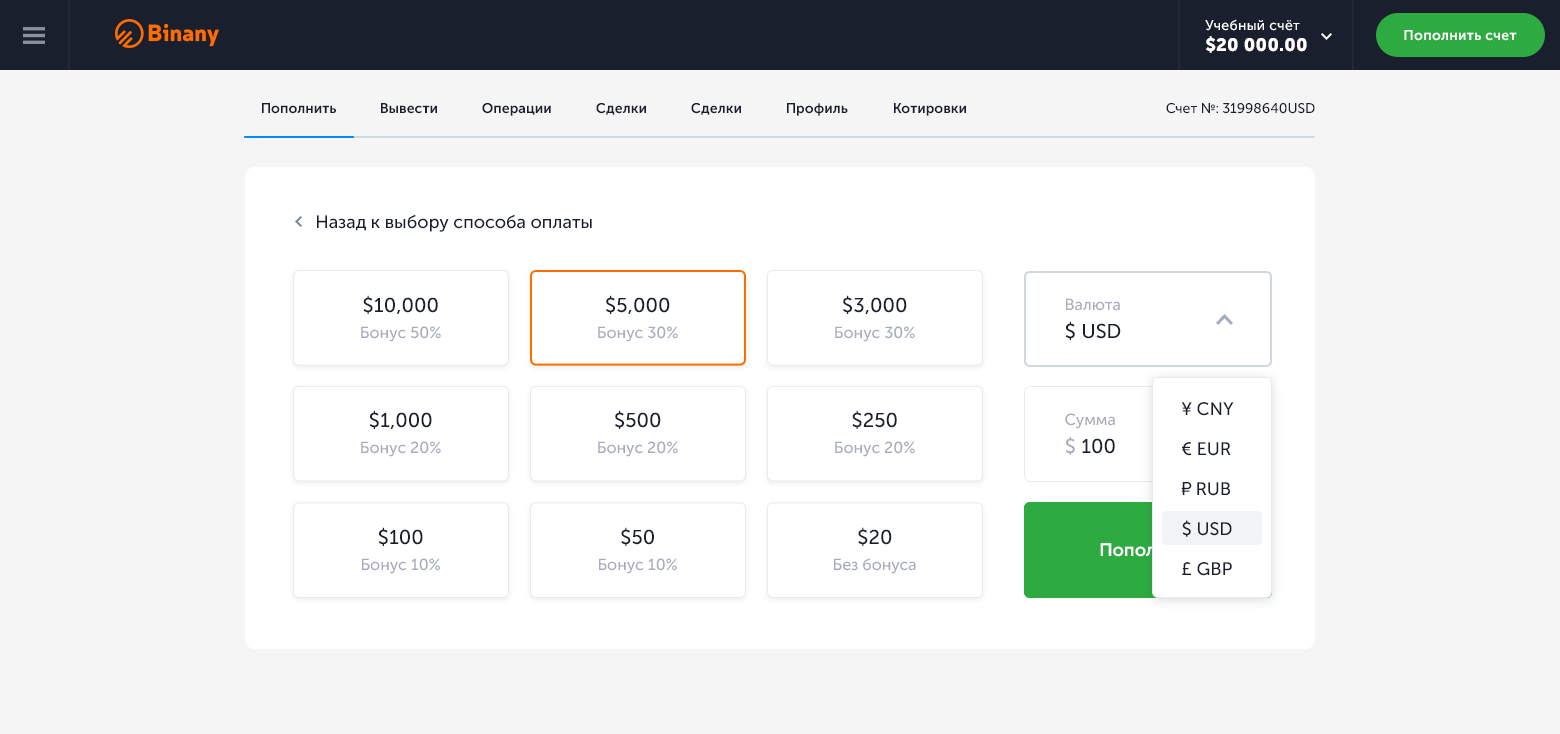
<style>
.page{position:relative;width:1560px;height:734px;background:#f5f5f5}
.page>*{position:absolute;margin:0}
.t1{font:14px "MuseoSansCyrl-500";letter-spacing:0.02em;color:#ffffff}
.t2{font:18px "MuseoSansCyrl-900";letter-spacing:0.02em;color:#ffffff}
.t3{font:14px "MuseoSansCyrl-700";letter-spacing:0.02em;color:#ffffff}
.t4{font:14px "MuseoSansCyrl-700";color:#191f2d}
.t5{font:14px "MuseoSansCyrl-500";color:#191f2d}
.t6{font:18px "MuseoSansCyrl-500";color:#191f2d}
.t7{font:16px/26px "MuseoSansCyrl-500";color:#a5acbd}
.t8{font:20px "MuseoSansCyrl-500";color:#191f2d}
.t9{font:16px/28px "MuseoSansCyrl-500";color:#a5acbd}
.t10{font:20px/28px "MuseoSansCyrl-500";color:#191f2d}
.t11{font:20px/28px "MuseoSansCyrl-500";color:#a5acbd}
.t12{font:18px/40px "MuseoSansCyrl-500";color:#191f2d}
.t13{font:18px/40px "ArialMT";color:#191f2d}
.t14{font:20px/24px "MuseoSansCyrl-500";color:#191f2d}
.t15{font:18px "MuseoSansCyrl-700";color:#ffffff}
</style>
<div class="page">
<p class="t1" style="left:1205px;top:19px;width:102px;height:34px">Учебный счёт<br><span class="t2">$20 000.00</span></p>
<p class="t3" style="left:1404px;top:30px;width:113px;height:11px">Пополнить счет</p>
<p class="t4" style="left:262px;top:103px;width:74px;height:11px">Пополнить</p>
<p class="t4" style="left:381px;top:103px;width:56px;height:11px">Вывести</p>
<p class="t4" style="left:482px;top:103px;width:69px;height:13px">Операции</p>
<p class="t4" style="left:596px;top:103px;width:50px;height:12px">Сделки</p>
<p class="t4" style="left:691px;top:103px;width:50px;height:12px">Сделки</p>
<p class="t4" style="left:787px;top:103px;width:61px;height:13px">Профиль</p>
<p class="t4" style="left:894px;top:103px;width:72px;height:13px">Котировки</p>
<p class="t5" style="left:1166px;top:103px;width:149px;height:11px">Счет №: 31998640USD</p>
<p class="t6" style="left:317px;top:214px;width:275px;height:18px">Назад к выбору способа оплаты</p>
<p class="t7" style="left:361px;top:295px;width:80px;height:47px;text-align:center"><span class="t8">$10,000<br></span>Бонус 50%</p>
<p class="t7" style="left:598px;top:295px;width:80px;height:47px;text-align:center"><span class="t8">$5,000<br></span>Бонус 30%</p>
<p class="t7" style="left:835px;top:295px;width:80px;height:47px;text-align:center"><span class="t8">$3,000<br></span>Бонус 30%</p>
<p class="t9" style="left:1065px;top:298px;width:56px;height:42px">Валюта<br><span class="t10">$ USD</span></p>
<p class="t9" style="left:1065px;top:298px;width:56px;height:42px">Валюта<br><span class="t10">$ USD</span></p>
<p class="t7" style="left:361px;top:410px;width:80px;height:47px;text-align:center"><span class="t8">$1,000<br></span>Бонус 20%</p>
<p class="t7" style="left:598px;top:410px;width:80px;height:47px;text-align:center"><span class="t8">$500<br></span>Бонус 20%</p>
<p class="t7" style="left:835px;top:410px;width:80px;height:47px;text-align:center"><span class="t8">$250<br></span>Бонус 20%</p>
<p class="t9" style="left:1065px;top:413px;width:50px;height:42px">Сумма<br><span class="t11">$</span><span class="t10"> 100</span></p>
<p class="t12" style="left:1181px;top:402px;width:53px;height:174px">¥ CNY<br>€ EUR<br><span class="t13">₽ </span>RUB<br>$ USD<br>£ GBP</p>
<p class="t7" style="left:362px;top:527px;width:78px;height:47px;text-align:center"><span class="t8">$100<br></span>Бонус 10%</p>
<p class="t7" style="left:599px;top:527px;width:78px;height:47px;text-align:center"><span class="t8">$50<br></span>Бонус 10%</p>
<p class="t7" style="left:834px;top:527px;width:82px;height:47px;text-align:center"><span class="t14">$20<br></span>Без бонуса</p>
<p class="t15" style="left:1100px;top:543px;width:96px;height:14px">Пополнить</p>
<p class="t15" style="left:1100px;top:543px;width:96px;height:14px">Пополнить</p>
</div>
